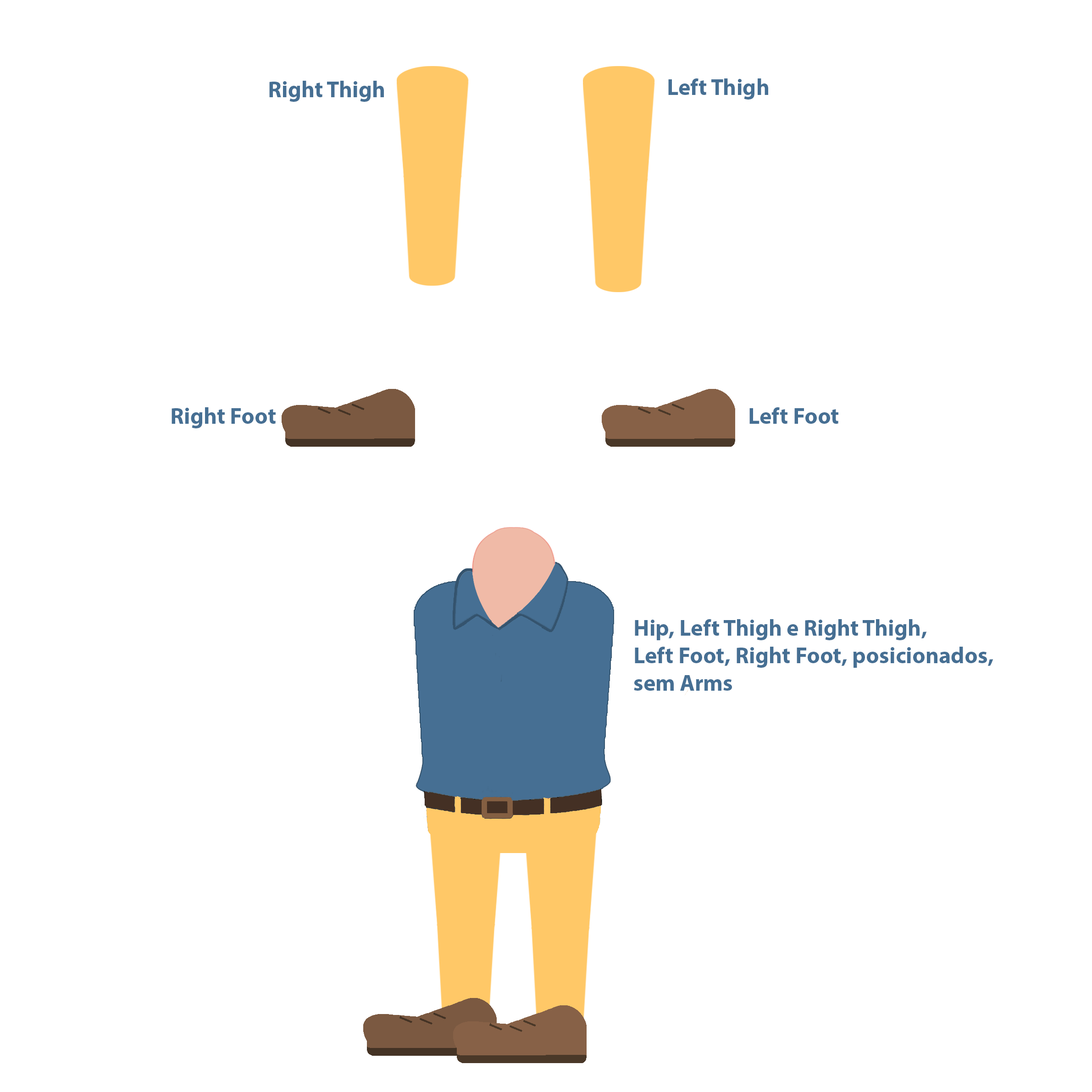
<style>
.page{position:relative;width:1092px;height:1092px;background:#ffffff}
.page>*{position:absolute;margin:0}
.t1{font:22.9px "MyriadHebrew-Bold";color:#466f93}
</style>
<div class="page">
<p class="t1" style="left:269px;top:81px;width:115px;height:21px">Right Thigh</p>
<p class="t1" style="left:668px;top:78px;width:100px;height:22px">Left Thigh</p>
<p class="t1" style="left:172px;top:407px;width:104px;height:21px">Right Foot</p>
<p class="t1" style="left:749px;top:407px;width:89px;height:17px">Left Foot</p>
<p class="t1" style="left:634px;top:619px;width:359px;height:72px">Hip, Left Thigh e Right Thigh,<br>Left Foot, Right Foot, posicionados,<br>sem Arms</p>
</div>
